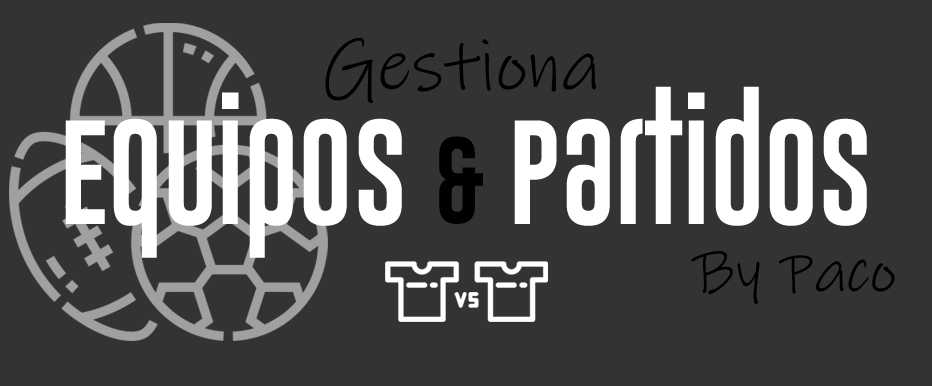
<style>
.page{position:relative;width:932px;height:386px;background:#333333}
.page>*{position:absolute;margin:0}
.t1{font:73.5px "InkFree";color:#000000}
.t2{font:107.9px "GoboldUplow";color:#ffffff}
.t3{font:89.9px "GoboldUplow";color:#000000}
.t4{font:61.7px "InkFree";color:#000000}
</style>
<div class="page">
<p class="t1" style="left:325px;top:38px;width:272px;height:65px">Gestiona</p>
<p class="t2" style="left:65px;top:86px;width:802px;height:172px">Equipos <span class="t3">&amp; </span>Partidos</p>
<p class="t4" style="left:691px;top:251px;width:204px;height:53px">By Paco</p>
</div>
